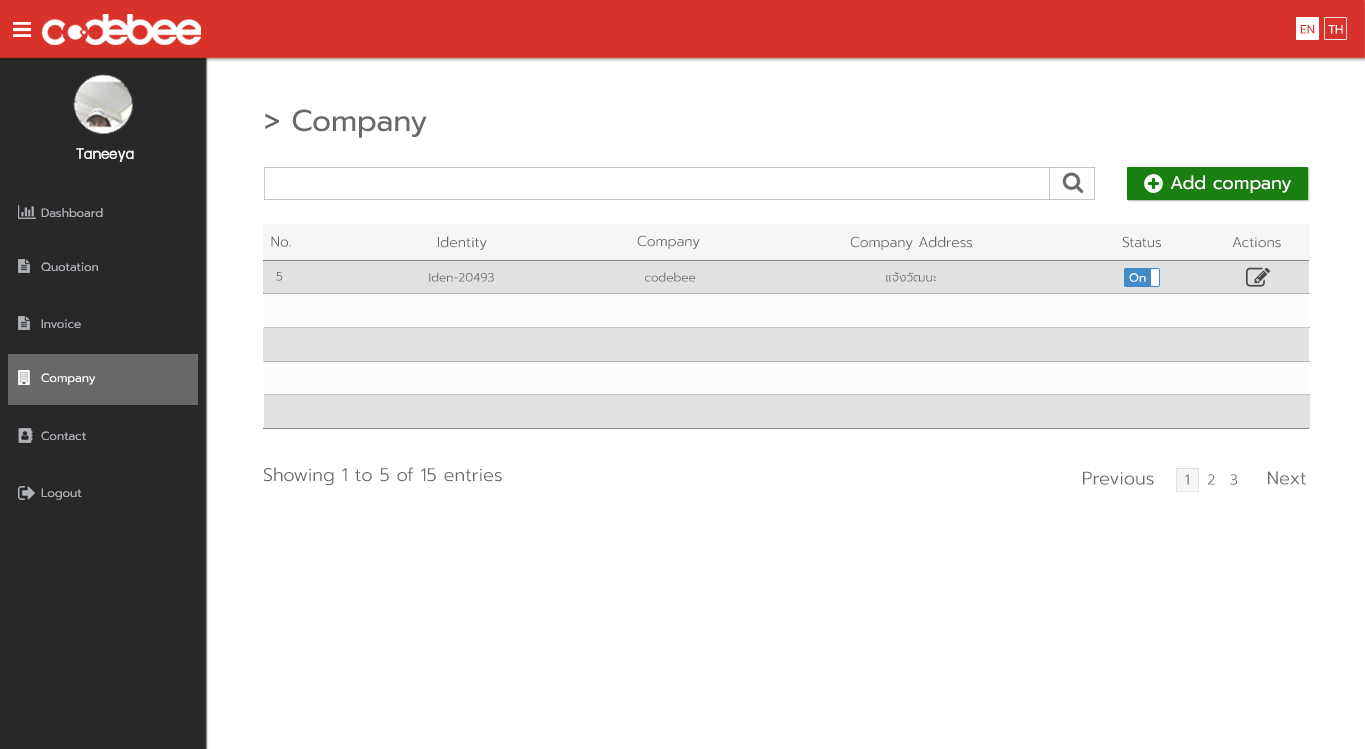
<style>
.page{position:relative;width:1365px;height:749px;background:#ffffff}
.page>*{position:absolute;margin:0}
.t1{font:12px "Prompt-Regular";color:#d8322b}
.t2{font:12px "Prompt-Regular";color:#ffffff}
.t3{font:30px "Prompt-Regular";color:#686868}
.t4{font:18px "supermarket";color:#ffffff}
.t5{font:18px "Prompt-Regular";color:#ffffff}
.t6{font:12px "Prompt-Regular";color:#aeb2b7}
.t7{font:14px "Prompt-Light";color:#686868}
.t8{font:12px "Prompt-Light";color:#686868}
.t9{font:18px "Prompt-Light";color:#686868}
</style>
<div class="page">
<p class="t1" style="left:1300px;top:25px;width:15px;height:9px">EN</p>
<p class="t2" style="left:1328px;top:25px;width:15px;height:9px">TH</p>
<p class="t3" style="left:265px;top:109px;width:162px;height:29px">&gt; Company</p>
<p class="t4" style="left:76px;top:148px;width:58px;height:14px">Taneeya</p>
<p class="t5" style="left:1170px;top:175px;width:121px;height:18px">Add company</p>
<p class="t6" style="left:41px;top:208px;width:62px;height:10px">Dashboard</p>
<p class="t7" style="left:271px;top:236px;width:20px;height:11px">No.</p>
<p class="t7" style="left:438px;top:236px;width:49px;height:14px">Identity</p>
<p class="t7" style="left:637px;top:235px;width:63px;height:14px">Company</p>
<p class="t7" style="left:850px;top:236px;width:122px;height:14px">Company Address</p>
<p class="t7" style="left:1122px;top:236px;width:39px;height:12px">Status</p>
<p class="t7" style="left:1232px;top:237px;width:49px;height:11px">Actions</p>
<p class="t6" style="left:41px;top:262px;width:57px;height:10px">Quotation</p>
<p class="t8" style="left:276px;top:272px;width:7px;height:9px">5</p>
<p class="t8" style="left:429px;top:272px;width:65px;height:10px">Iden-20493</p>
<p class="t8" style="left:645px;top:272px;width:51px;height:10px">codebee</p>
<p class="t8" style="left:886px;top:272px;width:51px;height:10px">แจ้งวัฒนะ</p>
<p class="t2" style="left:1129px;top:273px;width:17px;height:9px">On</p>
<p class="t6" style="left:41px;top:319px;width:40px;height:10px">Invoice</p>
<p class="t2" style="left:41px;top:373px;width:55px;height:12px">Company</p>
<p class="t6" style="left:41px;top:431px;width:45px;height:10px">Contact</p>
<p class="t9" style="left:264px;top:467px;width:238px;height:19px">Showing 1 to 5 of 15 entries</p>
<p class="t9" style="left:1083px;top:471px;width:71px;height:14px">Previous</p>
<p class="t9" style="left:1268px;top:471px;width:38px;height:14px">Next</p>
<p class="t7" style="left:1185px;top:474px;width:4px;height:11px">1</p>
<p class="t7" style="left:1208px;top:474px;width:7px;height:11px">2</p>
<p class="t7" style="left:1230px;top:474px;width:7px;height:11px">3</p>
<p class="t6" style="left:41px;top:488px;width:41px;height:12px">Logout</p>
</div>
